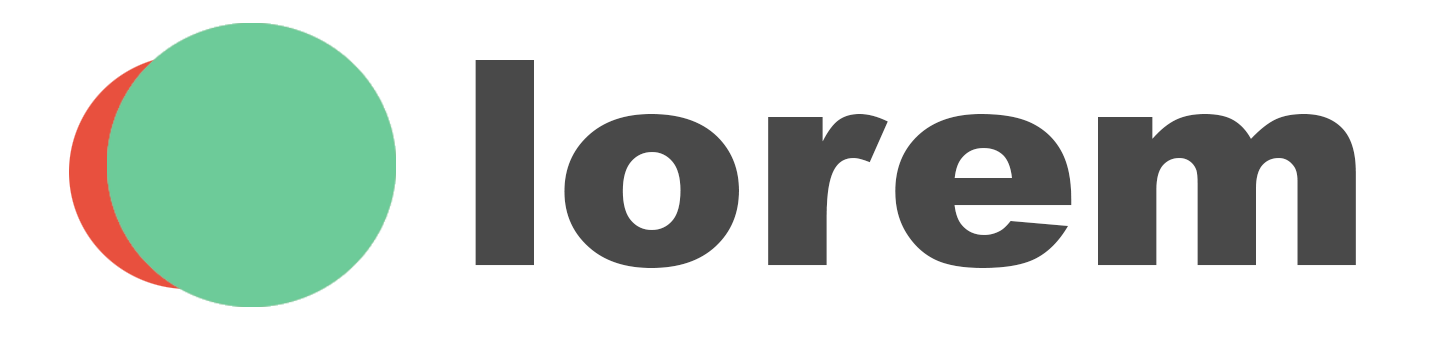
<style>
.page{position:relative;width:1450px;height:353px;background:#ffffff}
.page>*{position:absolute;margin:0}
.t1{font:286.2px "Arial-Black";color:#494949}
</style>
<div class="page">
<p class="t1" style="left:475px;top:60px;width:881px;height:208px">lorem</p>
</div>
